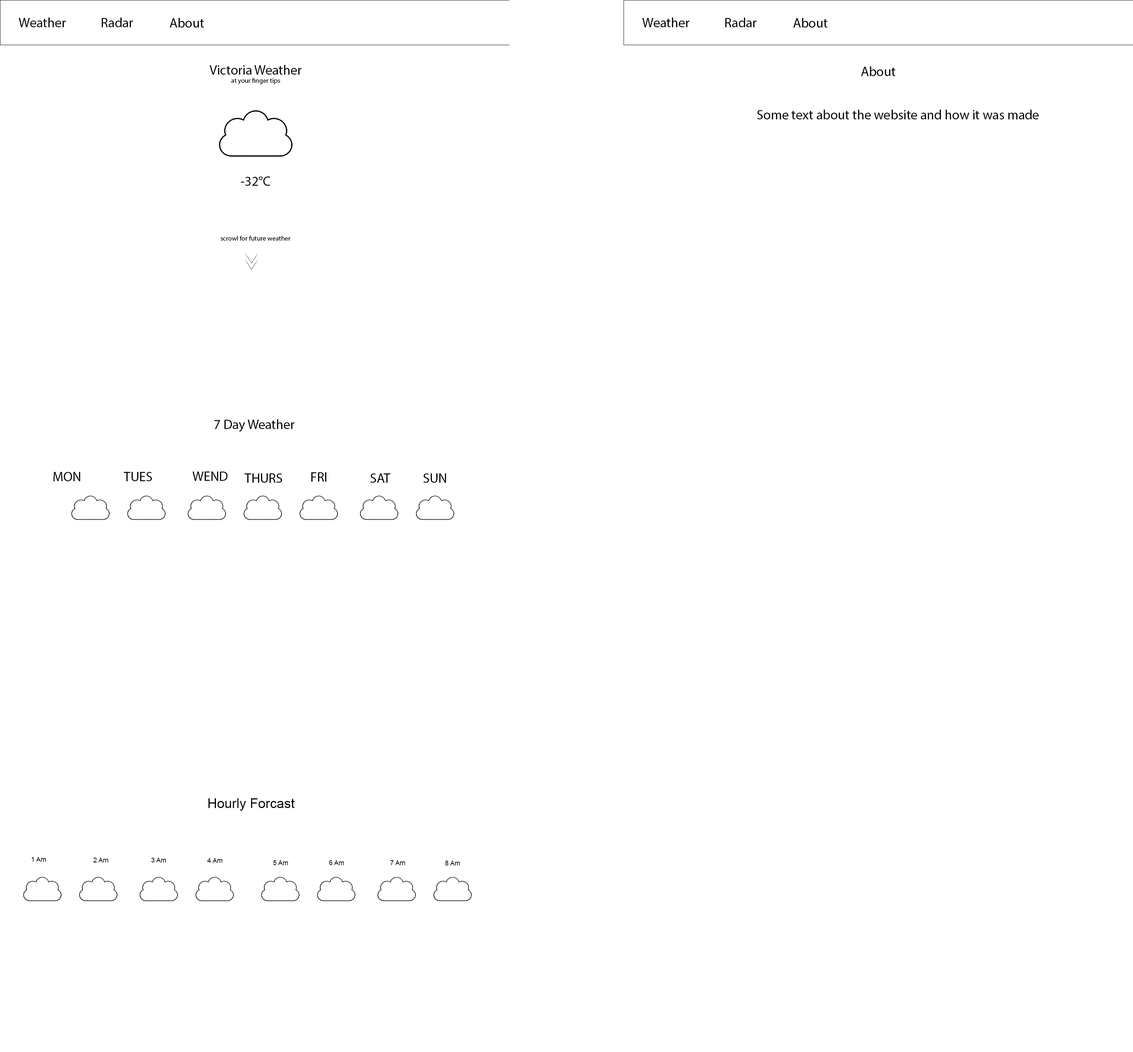
<style>
.page{position:relative;width:1133px;height:1052px;background:#ffffff}
.page>*{position:absolute;margin:0}
.t1{font:13.4px "MyriadPro-Regular";color:#000000}
.t2{font:6.7px "MyriadPro-Regular";color:#000000}
.t3{font:13.4px "ArialMT";color:#000000}
.t4{font:6.7px "ArialMT";color:#000000}
</style>
<div class="page">
<p class="t1" style="left:19px;top:18px;width:47px;height:9px">Weather</p>
<p class="t1" style="left:101px;top:18px;width:32px;height:9px">Radar</p>
<p class="t1" style="left:170px;top:18px;width:34px;height:10px">About</p>
<p class="t1" style="left:642px;top:18px;width:48px;height:9px">Weather</p>
<p class="t1" style="left:725px;top:18px;width:32px;height:9px">Radar</p>
<p class="t1" style="left:794px;top:18px;width:34px;height:10px">About</p>
<p class="t2" style="left:210px;top:65px;width:92px;height:19px;text-align:center"><span class="t1">Victoria Weather<br></span>at your finger tips</p>
<p class="t1" style="left:861px;top:66px;width:35px;height:10px">About</p>
<p class="t1" style="left:757px;top:110px;width:282px;height:9px">Some text about the website and how it was made</p>
<p class="t1" style="left:241px;top:176px;width:29px;height:10px">-32°C</p>
<p class="t2" style="left:220px;top:236px;width:71px;height:5px">scrowl for future weather</p>
<p class="t1" style="left:215px;top:419px;width:80px;height:13px">7 Day Weather</p>
<p class="t1" style="left:53px;top:472px;width:27px;height:9px">MON</p>
<p class="t1" style="left:123px;top:472px;width:29px;height:9px">TUES</p>
<p class="t1" style="left:193px;top:472px;width:35px;height:9px">WEND</p>
<p class="t1" style="left:244px;top:473px;width:38px;height:10px">THURS</p>
<p class="t1" style="left:311px;top:472px;width:15px;height:10px">FRI</p>
<p class="t1" style="left:370px;top:473px;width:21px;height:10px">SAT</p>
<p class="t1" style="left:423px;top:473px;width:23px;height:10px">SUN</p>
<p class="t3" style="left:209px;top:798px;width:86px;height:13px">Hourly Forcast</p>
<p class="t4" style="left:31px;top:857px;width:15px;height:5px">1 Am</p>
<p class="t4" style="left:93px;top:858px;width:15px;height:5px">2 Am</p>
<p class="t4" style="left:151px;top:858px;width:15px;height:5px">3 Am</p>
<p class="t4" style="left:207px;top:858px;width:15px;height:5px">4 Am</p>
<p class="t4" style="left:273px;top:860px;width:15px;height:5px">5 Am</p>
<p class="t4" style="left:329px;top:860px;width:15px;height:5px">6 Am</p>
<p class="t4" style="left:390px;top:860px;width:15px;height:5px">7 Am</p>
<p class="t4" style="left:445px;top:861px;width:15px;height:5px">8 Am</p>
</div>
